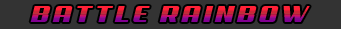
<style>
.page{position:relative;width:341px;height:29px;background:#333333}
.page>*{position:absolute;margin:0}
.t1{font:23.3px "Aero";letter-spacing:0.125em;scale:1.14 1}
</style>
<div class="page">
<p class="t1" style="left:30px;top:6px;width:280px;height:16px">BATTLE RAINBOW</p>
</div>
